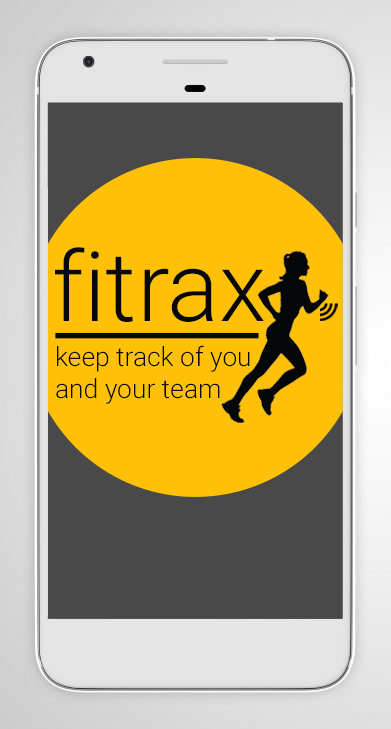
<style>
.page{position:relative;width:391px;height:729px;background:#ffc107}
.page>*{position:absolute;margin:0}
.t1{font:97px "Roboto-Light";color:#060709}
.t2{font:26.4px "Roboto-Light";color:#060709}
</style>
<div class="page">
<p class="t1" style="left:55px;top:247px;width:209px;height:75px">fitrax</p>
<p class="t2" style="left:56px;top:345px;width:194px;height:59px">keep track of you <br>and your team</p>
</div>
